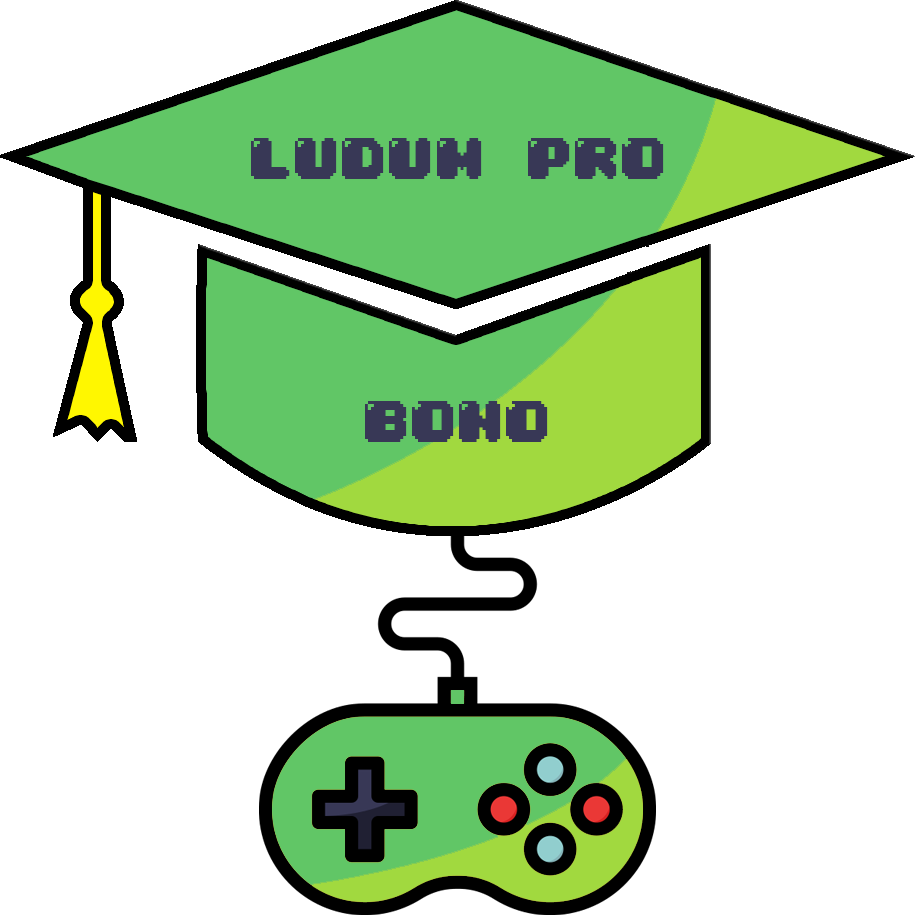
<style>
.page{position:relative;width:915px;height:915px;background:#ffffff}
.page>*{position:absolute;margin:0}
.t1{font:50px "04b30";color:#383856}
</style>
<div class="page">
<p class="t1" style="left:251px;top:138px;width:413px;height:41px">LUDUM PRO</p>
<p class="t1" style="left:365px;top:401px;width:183px;height:41px">BONO</p>
</div>
